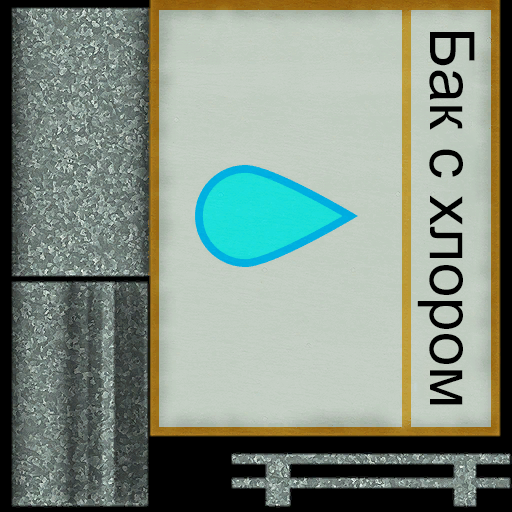
<style>
.page{position:relative;width:512px;height:512px}
.page>*{position:absolute;margin:0}
.t1{font:62px "ArialMT";color:#000000}
</style>
<div class="page">
<p class="t1" style="left:417px;top:32px;width:58px;height:373px;rotate:90deg">Бак с хлором</p>
</div>
